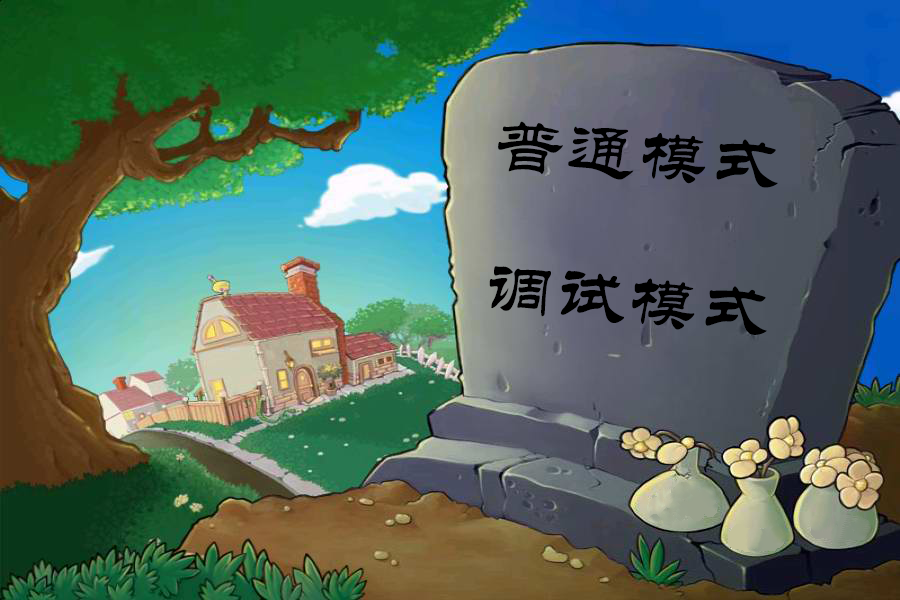
<style>
.page{position:relative;width:900px;height:600px}
.page>*{position:absolute;margin:0}
.t1{font:72px "STLiti";color:#000000}
</style>
<div class="page">
<p class="t1" style="left:498px;top:121px;width:280px;height:67px;rotate:4deg">普通模式</p>
<p class="t1" style="left:489px;top:266px;width:278px;height:69px;rotate:5deg">调试模式</p>
</div>
